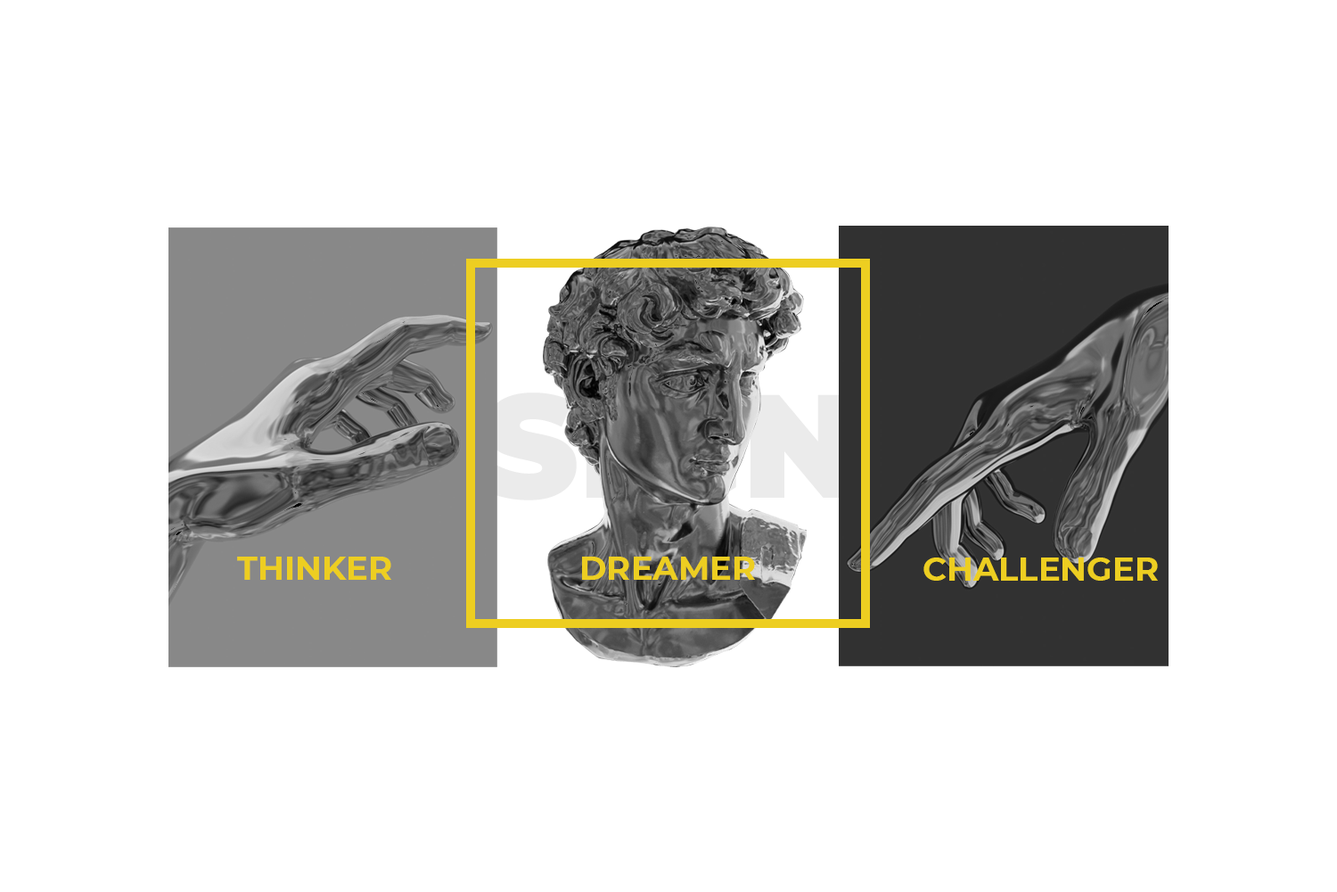
<style>
.page{position:relative;width:1337px;height:892px;background:#ffffff}
.page>*{position:absolute;margin:0}
.t1{font:33px "Montserrat-Bold";color:#edce21}
</style>
<div class="page">
<p class="t1" style="left:237px;top:556px;width:154px;height:24px">THINKER</p>
<p class="t1" style="left:582px;top:556px;width:173px;height:24px">DREAMER</p>
<p class="t1" style="left:924px;top:557px;width:234px;height:23px">CHALLENGER</p>
</div>
